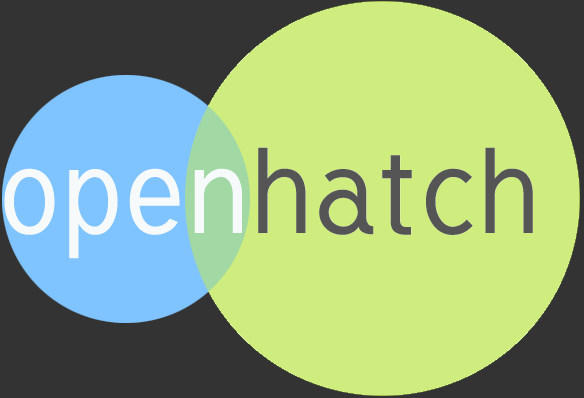
<style>
.page{position:relative;width:584px;height:398px;background:#ceed7e}
.page>*{position:absolute;margin:0}
.t1{font:120px "Tuffy"}
.t2{font:120px "Tuffy";color:#555555}
</style>
<div class="page">
<p class="t1" style="left:4px;top:147px;width:529px;height:112px">openhatch</p>
<p class="t2" style="left:258px;top:147px;width:275px;height:88px">hatch</p>
</div>
